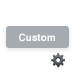
<style>
.page{position:relative;width:75px;height:75px;background:#ffffff}
.page>*{position:absolute;margin:0}
.t1{font:10px "Helvetica-Bold";color:#ffffff}
</style>
<div class="page">
<p class="t1" style="left:19px;top:33px;width:36px;height:9px">Custom</p>
</div>
